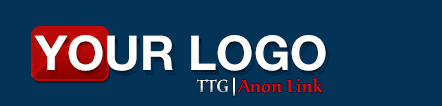
<style>
.page{position:relative;width:442px;height:106px;background:#043358}
.page>*{position:absolute;margin:0}
.t1{font:48px "HelveticaNeueLTStd-Bd";color:#ffffff}
.t2{font:48px "HelveticaNeueLTStd-Bd"}
.t3{font:18px "HelveticaNeueLTStd-Bd";color:#ffffff}
.t4{font:18px "URWAlcuinT-Regu";color:#ff0000}
.t5{font:18px "URWAlcuinT-Regu";color:#ffffff}
</style>
<div class="page">
<p class="t1" style="left:34px;top:35px;width:292px;height:36px">YOUR LOGO</p>
<p class="t2" style="left:37px;top:38px;width:292px;height:36px">YOUR LOGO</p>
<p class="t3" style="left:233px;top:77px;width:2px;height:19px">|</p>
<p class="t4" style="left:237px;top:78px;width:86px;height:15px">Anon Link</p>
<p class="t5" style="left:196px;top:79px;width:32px;height:14px">TTG</p>
</div>
